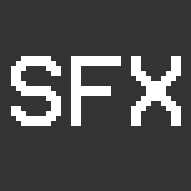
<style>
.page{position:relative;width:191px;height:191px;background:#333333}
.page>*{position:absolute;margin:0}
.t1{font:80px "VCROSDMonoRUSbyD";color:#ffffff}
</style>
<div class="page">
<p class="t1" style="left:11px;top:56px;width:170px;height:70px">SFX</p>
</div>
